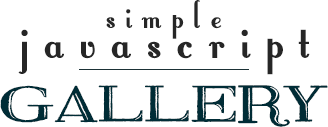
<style>
.page{position:relative;width:328px;height:127px;background:#ffffff}
.page>*{position:absolute;margin:0}
.t1{font:72px/30px "FontleroyBrownNF";letter-spacing:0.2em;color:#262626}
.t2{font:48px/30px "FontleroyBrownNF";letter-spacing:0.2em;color:#262626}
.t3{font:72px/64px "FineBlackboard";color:#002c36}
</style>
<div class="page">
<p class="t1" style="left:0px;top:0px;width:328px;height:127px;text-align:center"><span class="t2">simple<br></span>javascript<br><span class="t3">gallery</span></p>
</div>
